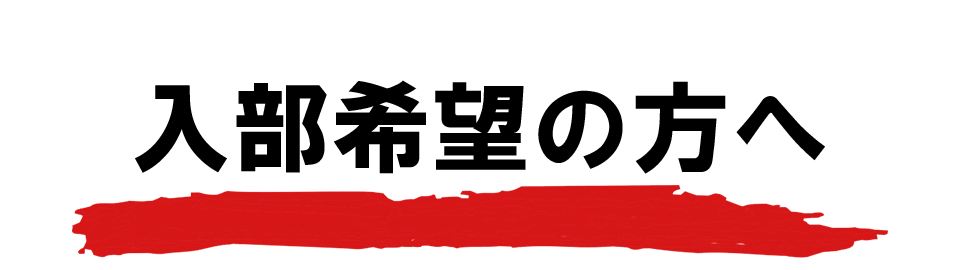
<style>
.page{position:relative;width:960px;height:270px;background:#ffffff}
.page>*{position:absolute;margin:0}
.t1{font:100px "HGSSoeiKakugothicUB";color:#000000}
</style>
<div class="page">
<p class="t1" style="left:135px;top:80px;width:690px;height:94px">入部希望の方へ</p>
</div>
